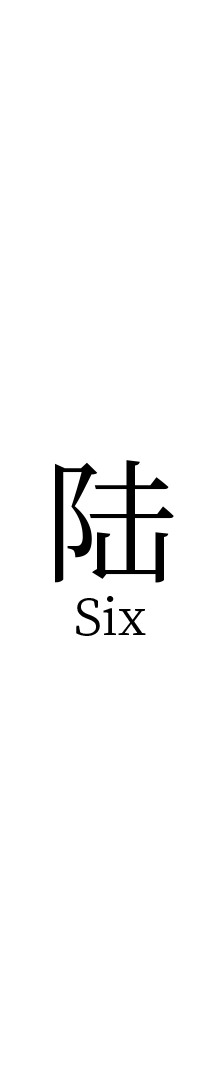
<style>
.page{position:relative;width:216px;height:1080px;background:#ffffff}
.page>*{position:absolute;margin:0}
.t1{font:133.3px "NotoSerifCJKsc-Regular";color:#000000}
.t2{font:50px "NotoSerifCJKsc-Regular";color:#000000}
</style>
<div class="page">
<p class="t1" style="left:55px;top:460px;width:119px;height:123px">陆</p>
<p class="t2" style="left:76px;top:596px;width:70px;height:40px">Six</p>
</div>
